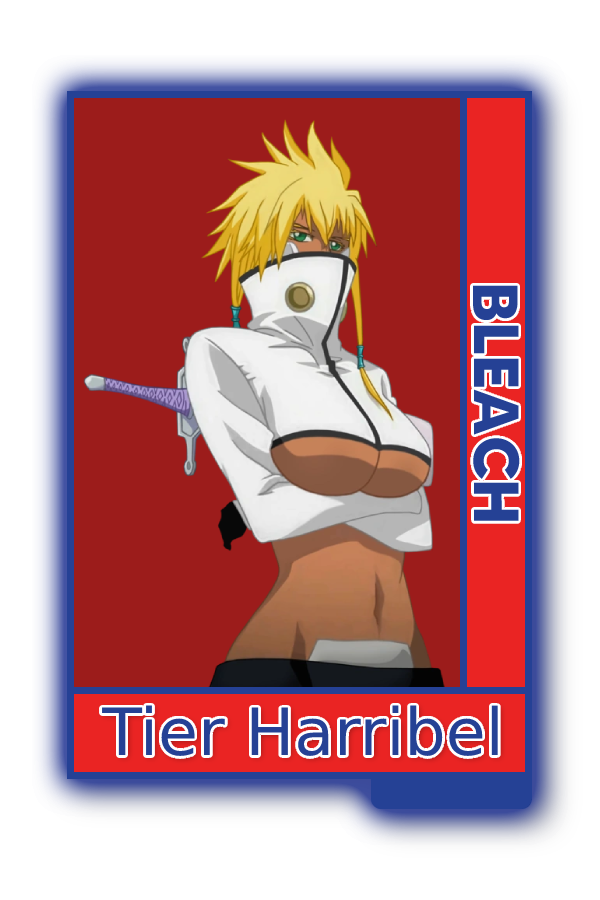
<style>
.page{position:relative;width:600px;height:900px;background:#9c1c1b}
.page>*{position:absolute;margin:0}
.t1{font:63.6px "MADETOMMY-Bold";color:#254195}
.t2{font:65px "CoolveticaRg-Regular";color:#254195}
</style>
<div class="page">
<p class="t1" style="left:473px;top:285px;width:47px;height:236px;rotate:90deg">BLEACH</p>
<p class="t2" style="left:102px;top:705px;width:396px;height:51px">Tier Harribel</p>
</div>
